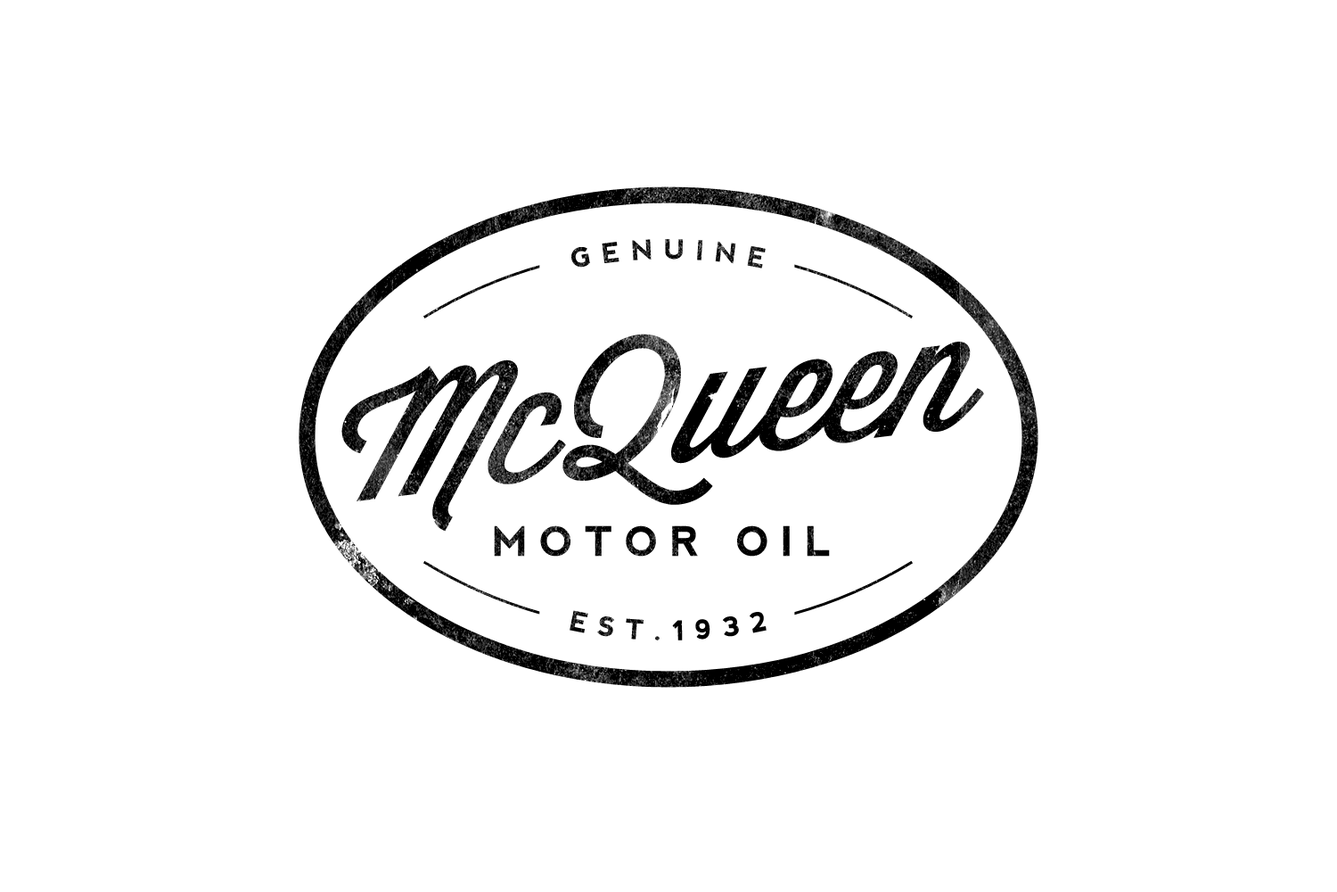
<style>
.page{position:relative;width:1337px;height:892px;background:#ffffff}
.page>*{position:absolute;margin:0}
.t1{font:26.7px "nevis-Bold";letter-spacing:0.4em;text-transform:uppercase}
.t2{font:167.7px "WisdomScriptAI"}
.t3{font:40.5px "nevis-Bold";letter-spacing:0.3em;color:#000000;text-transform:uppercase}
.t4{font:26.7px "nevis-Bold";letter-spacing:0.4em;color:#000000;text-transform:uppercase}
</style>
<div class="page">
<p class="t1" style="left:572px;top:239px;width:194px;height:29px">genuine</p>
<p class="t2" style="left:341px;top:333px;width:643px;height:198px;rotate:-7deg">McQueen</p>
<p class="t3" style="left:494px;top:525px;width:336px;height:31px">MOTOR OIL</p>
<p class="t4" style="left:570px;top:610px;width:197px;height:30px">EST.1932</p>
</div>
